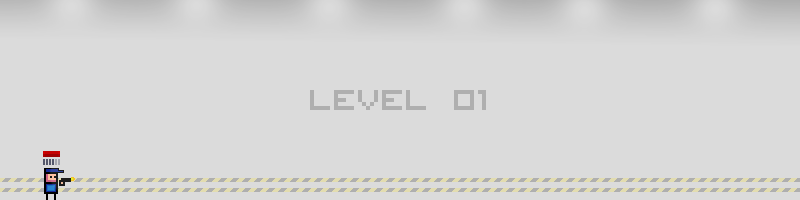
<style>
.page{position:relative;width:800px;height:200px;background:#dbdbdb}
.page>*{position:absolute;margin:0}
.t1{font:36px "Visitor -BRK-";color:#afafaf}
</style>
<div class="page">
<p class="t1" style="left:310px;top:90px;width:176px;height:20px">Level 01</p>
</div>
